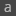
<style>
.page{position:relative;width:16px;height:16px;background:#464646}
.page>*{position:absolute;margin:0}
.t1{font:14px "OpenSans";color:#b7b7b7}
</style>
<div class="page">
<p class="t1" style="left:4px;top:4px;width:7px;height:8px">a</p>
</div>
